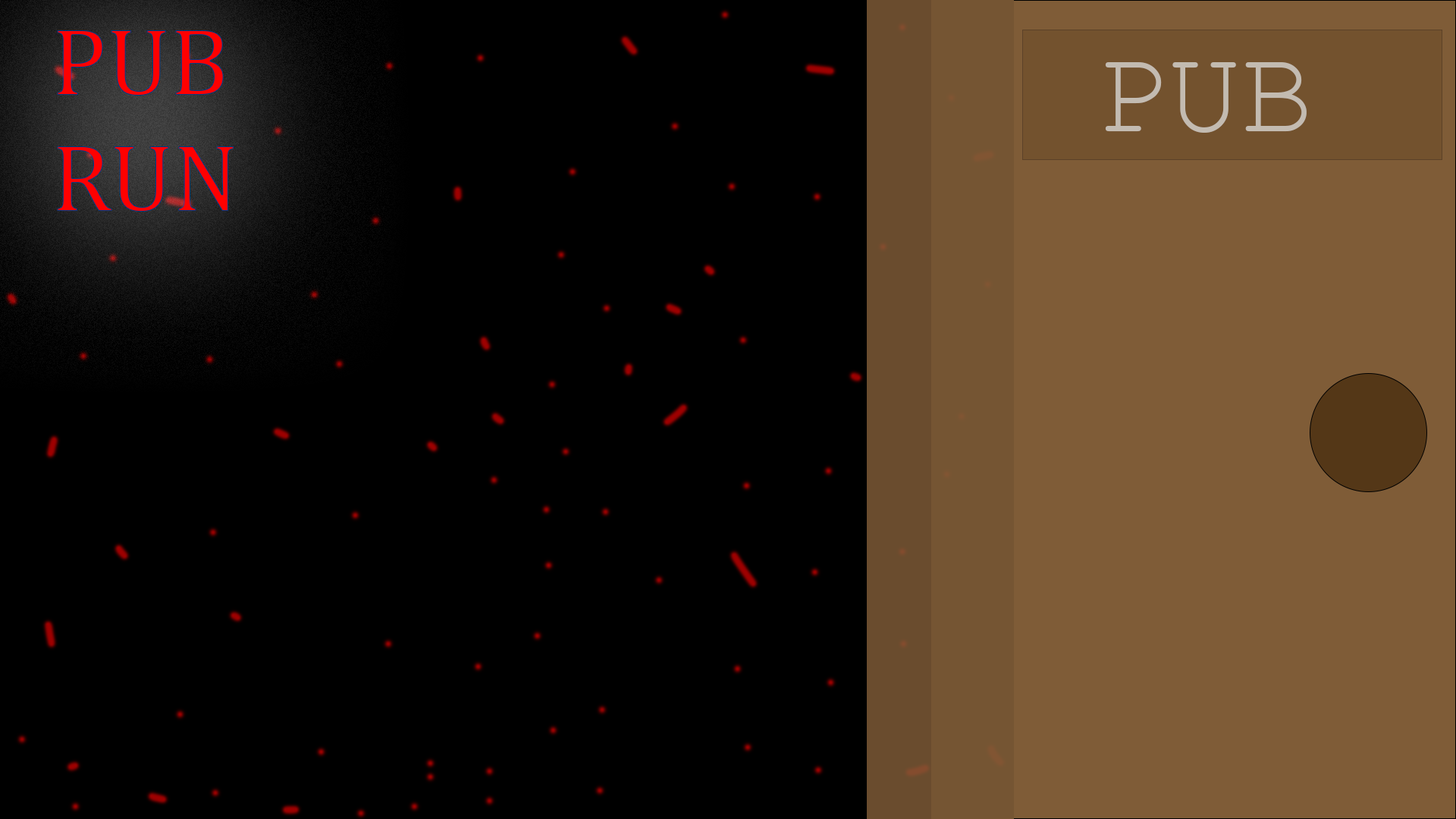
<style>
.page{position:relative;width:1456px;height:819px;background:#000000}
.page>*{position:absolute;margin:0}
.t1{font:97.3px "Cambria";color:#ff0000}
.t2{font:120.3px "CourierNewPSMT";color:#c3bbb1}
</style>
<div class="page">
<p class="t1" style="left:57px;top:30px;width:177px;height:182px">PUB <br>RUN</p>
<p class="t2" style="left:1105px;top:62px;width:202px;height:71px">PUB</p>
</div>
